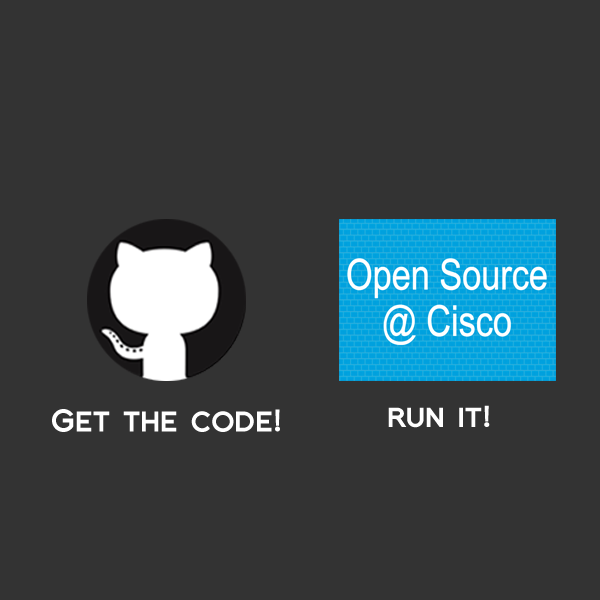
<style>
.page{position:relative;width:600px;height:600px;background:#333333}
.page>*{position:absolute;margin:0}
.t1{font:29.2px "FlorencesansSCBlack";color:#ffffff}
.t2{font:28.3px "FlorencesansSCBlack";color:#ffffff;scale:1.04 1}
</style>
<div class="page">
<p class="t1" style="left:52px;top:409px;width:228px;height:23px">Get the code!</p>
<p class="t2" style="left:388px;top:405px;width:102px;height:23px">run it!</p>
</div>
